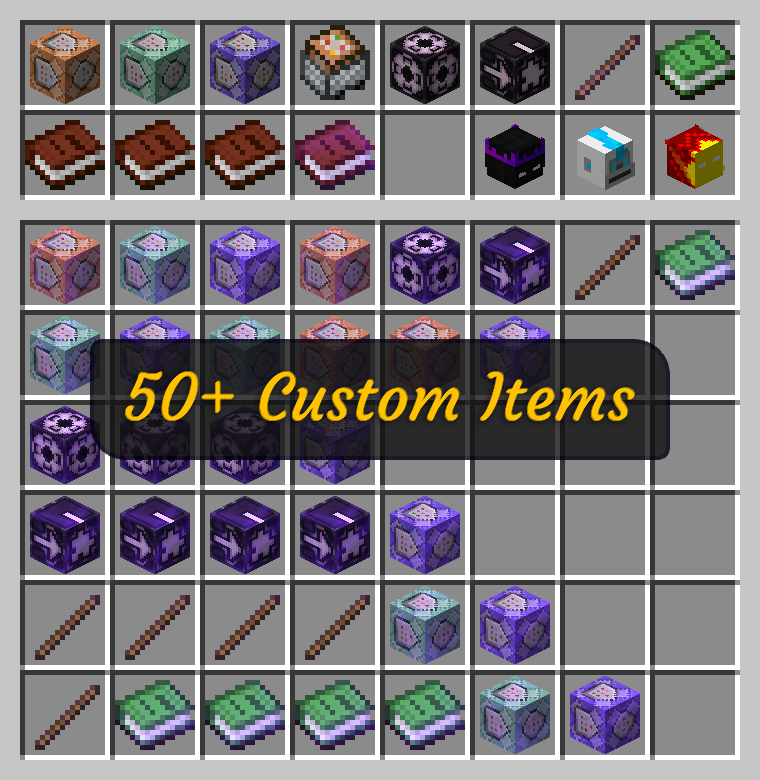
<style>
.page{position:relative;width:760px;height:780px;background:#8b8b8b}
.page>*{position:absolute;margin:0}
.t1{font:64px "Courgette-Regular";color:#ffc200}
</style>
<div class="page">
<p class="t1" style="left:124px;top:372px;width:511px;height:50px">50+ Custom Items</p>
<p class="t1" style="left:125px;top:371px;width:511px;height:50px;opacity:0.5">50+ Custom Items</p>
</div>
